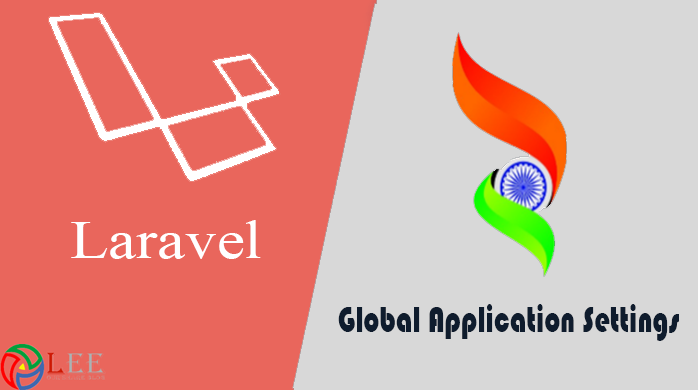
<style>
.page{position:relative;width:698px;height:390px;background:#d8d8d8}
.page>*{position:absolute;margin:0}
.t1{font:54.9px "TimesNewRomanPSMT";color:#ffffff;scale:1.14 1}
.t2{font:38.2px "Bauhaus93";color:#0f1c2d;scale:0.74 1}
</style>
<div class="page">
<p class="t1" style="left:71px;top:220px;width:190px;height:39px">Laravel</p>
<p class="t2" style="left:338px;top:304px;width:341px;height:37px">Global Application Settings</p>
</div>
